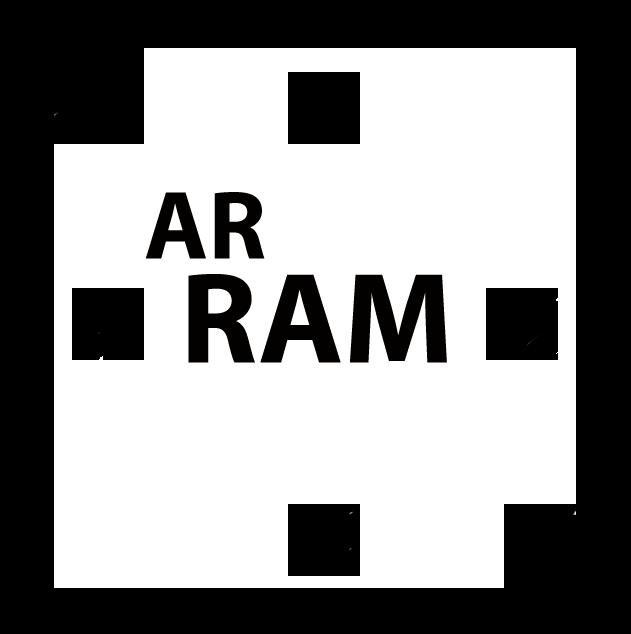
<style>
.page{position:relative;width:631px;height:634px;background:#ffffff}
.page>*{position:absolute;margin:0}
.t1{font:98px "MyriadPro-Bold";color:#030000}
.t2{font:130px "MyriadPro-Bold";color:#030000}
</style>
<div class="page">
<p class="t1" style="left:145px;top:192px;width:120px;height:67px">AR</p>
<p class="t2" style="left:188px;top:274px;width:259px;height:89px">RAM</p>
</div>
